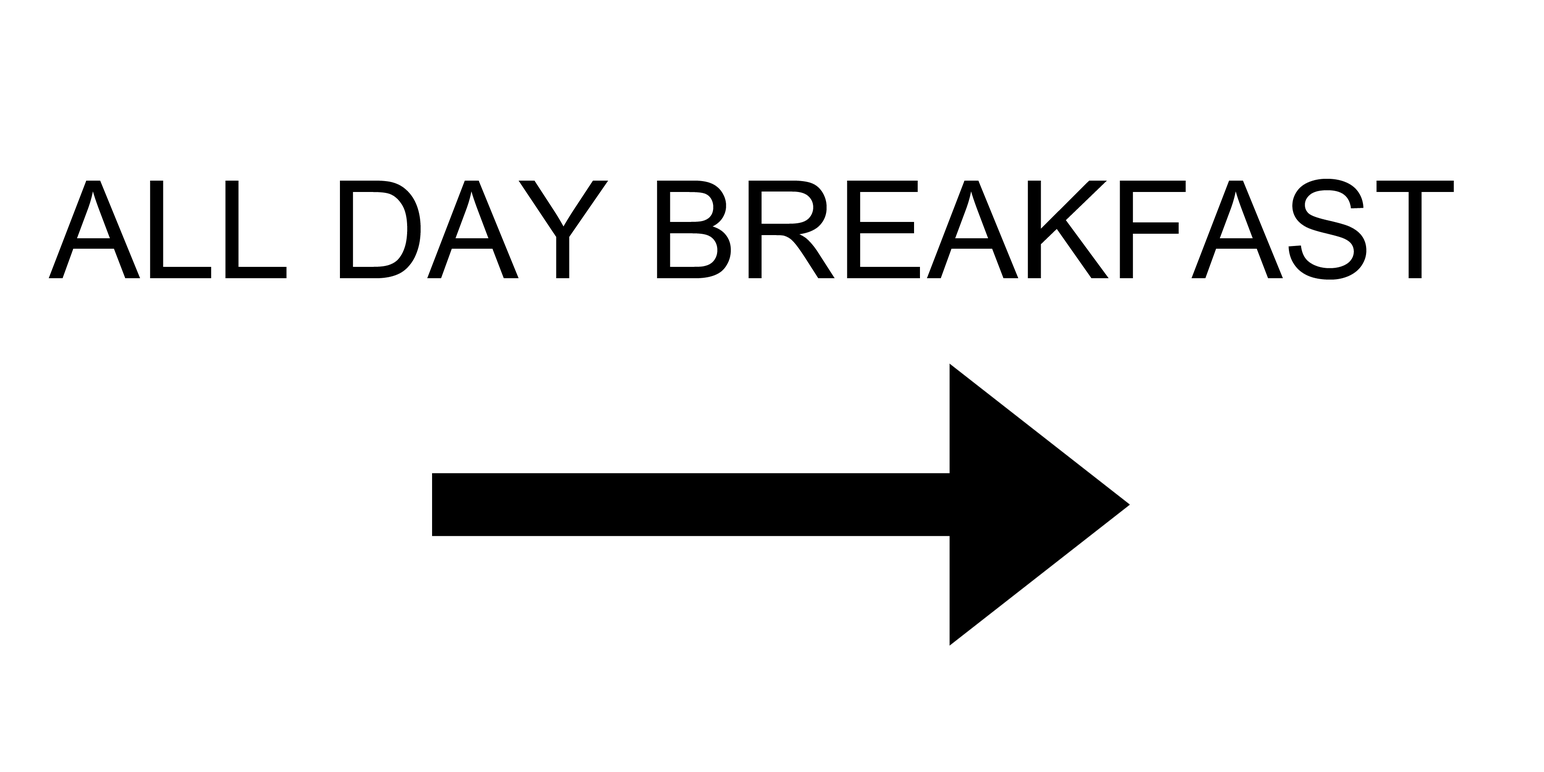
<style>
.page{position:relative;width:1544px;height:772px;background:#ffffff}
.page>*{position:absolute;margin:0}
.t1{font:136.2px "ArialMT";color:#000000}
</style>
<div class="page">
<p class="t1" style="left:49px;top:179px;width:1405px;height:101px">ALL DAY BREAKFAST</p>
</div>
